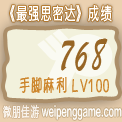
<style>
.page{position:relative;width:122px;height:122px;background:#f2f1dc}
.page>*{position:absolute;margin:0}
.t1{font:17.6px "HiraginoSansGB-W3";letter-spacing:0.1em;color:#ffffff;scale:0.62 1}
.t2{font:48px "STXingkai";letter-spacing:0.1em;color:#976525;scale:0.62 1}
.t3{font:18px "YuppySC-Regular";letter-spacing:0.1em;color:#cd862c;scale:0.62 1}
.t4{font:14px "HiraginoSansGB-W3";letter-spacing:0.05em;color:#ffffff;scale:0.62 1}
.t5{font:14px "FZLTZHK--GBK1-0";letter-spacing:0.025em;color:#ffffff;scale:0.55 1}
</style>
<div class="page">
<p class="t1" style="left:10px;top:5px;width:102px;height:17px">《最强思密达》成绩</p>
<p class="t2" style="left:61px;top:38px;width:47px;height:33px">768</p>
<p class="t3" style="left:19px;top:77px;width:90px;height:16px">手脚麻利 LV100</p>
<p class="t4" style="left:3px;top:104px;width:36px;height:15px;opacity:0.79">微朋佳游</p>
<p class="t5" style="left:41px;top:105px;width:81px;height:15px">weipenggame.com</p>
</div>
